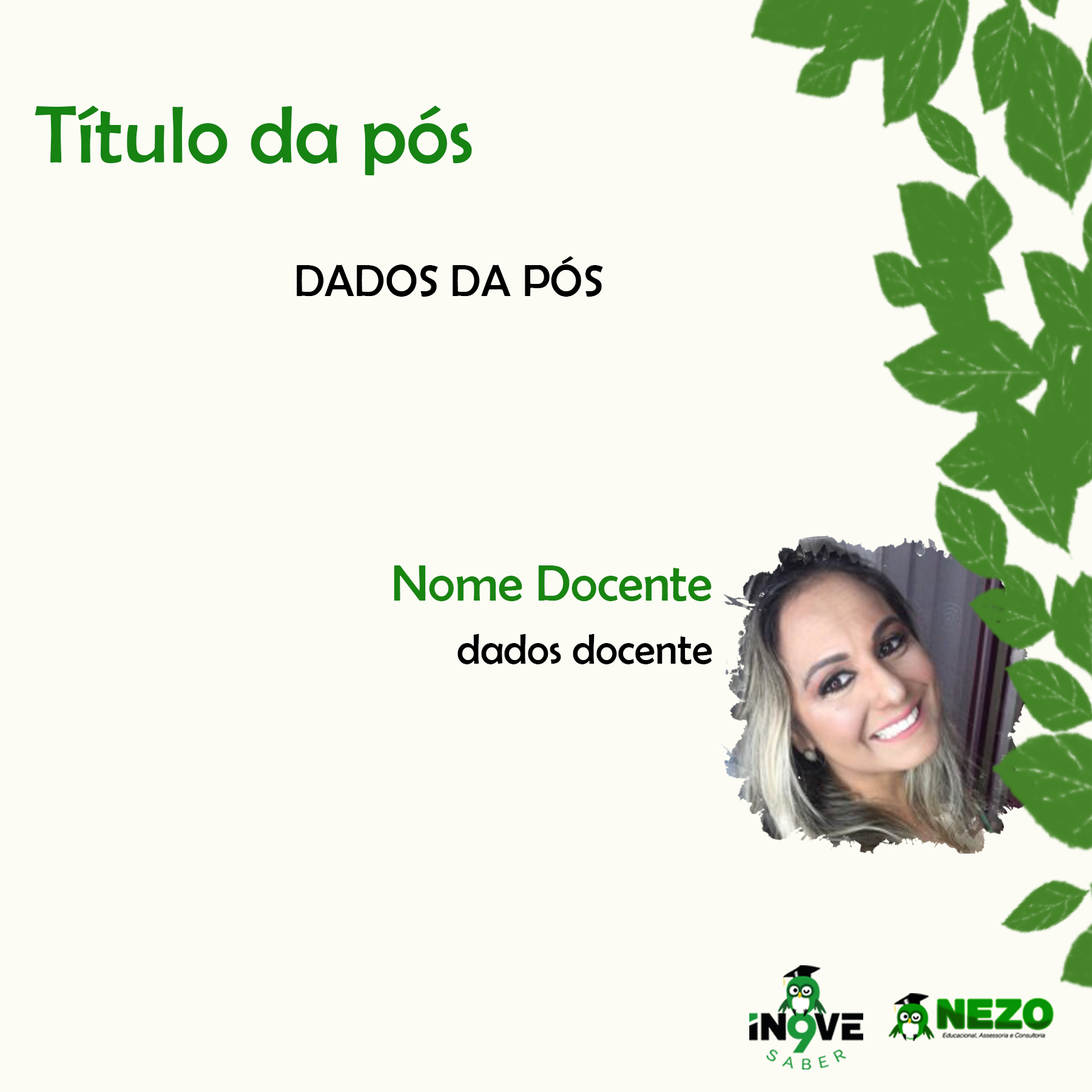
<style>
.page{position:relative;width:1092px;height:1092px;background:#fcfcf5}
.page>*{position:absolute;margin:0}
.t1{font:82.2px "BerlinSansFB-Reg";color:#168313}
.t2{font:45.2px "BerlinSansFB-Reg";color:#000000}
.t3{font:42.5px/63.1px "BerlinSansFB-Reg";color:#000000}
.t4{font:51.6px "BerlinSansFB-Reg";color:#198511}
</style>
<div class="page">
<p class="t1" style="left:35px;top:106px;width:437px;height:69px">Título da pós</p>
<p class="t2" style="left:297px;top:256px;width:306px;height:41px">DADOS DA PÓS</p>
<p class="t3" style="left:394px;top:565px;width:318px;height:99px;text-align:justify"><span class="t4">Nome Docente<br></span>dados docente</p>
</div>
